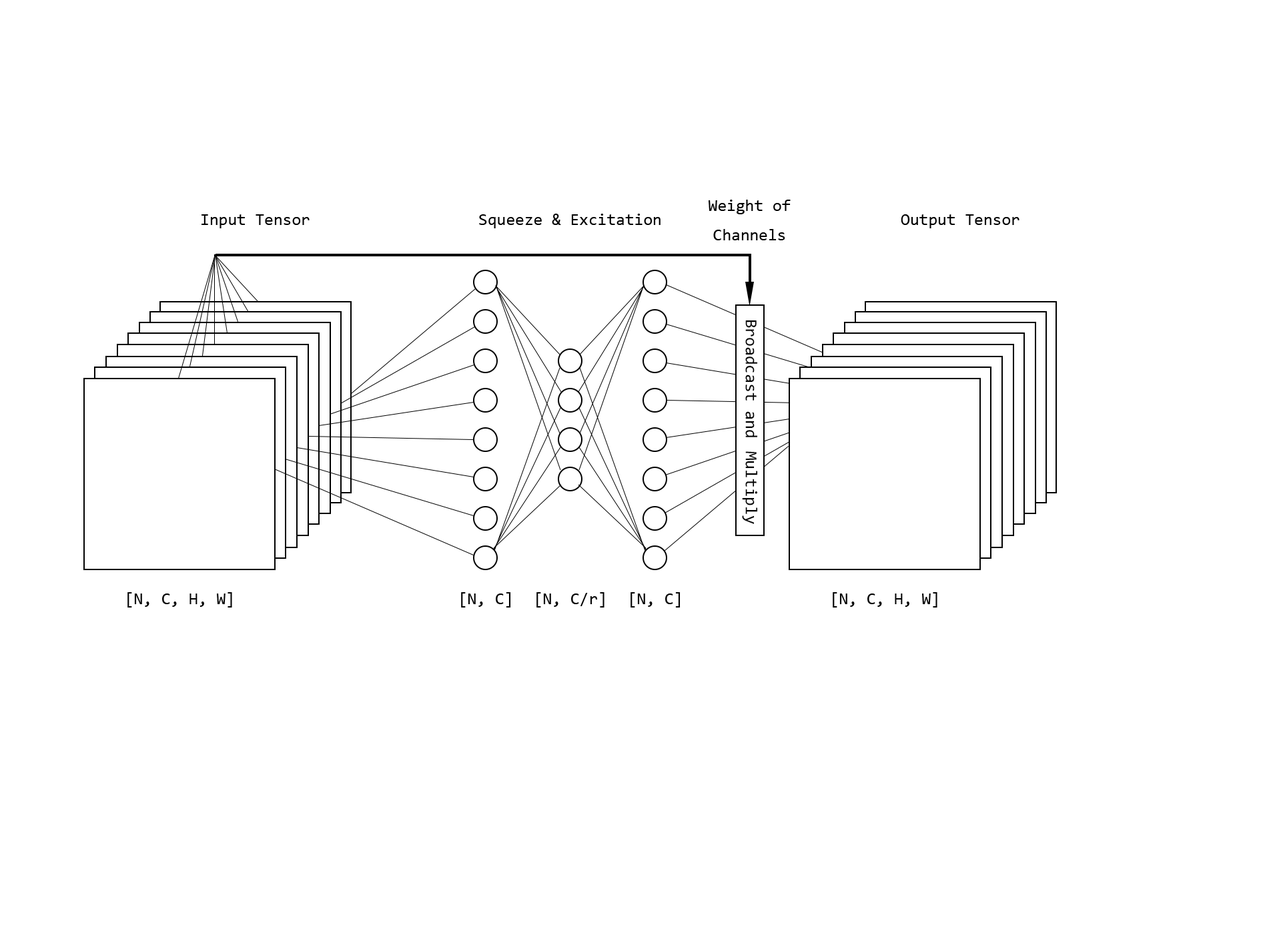
<style>
.page{position:relative;width:1261px;height:946px;background:#ffffff}
.page>*{position:absolute;margin:0}
.t1{font:16.7px "Consolas";color:#000000}
</style>
<div class="page">
<p class="t1" style="left:709px;top:200px;width:82px;height:40px;text-align:center">Weight of<br>Channels</p>
<p class="t1" style="left:202px;top:214px;width:108px;height:14px">Input Tensor</p>
<p class="t1" style="left:479px;top:214px;width:182px;height:14px">Squeeze &amp; Excitation</p>
<p class="t1" style="left:901px;top:214px;width:119px;height:14px">Output Tensor</p>
<p class="t1" style="left:742px;top:320px;width:16px;height:204px;text-align:center">Broadcast and  Multiply</p>
<p class="t1" style="left:127px;top:592px;width:105px;height:15px">[N, C, H, W]</p>
<p class="t1" style="left:461px;top:592px;width:50px;height:15px">[N, C]</p>
<p class="t1" style="left:536px;top:592px;width:69px;height:15px">[N, C/r]</p>
<p class="t1" style="left:631px;top:592px;width:50px;height:15px">[N, C]</p>
<p class="t1" style="left:833px;top:592px;width:105px;height:15px">[N, C, H, W]</p>
</div>
